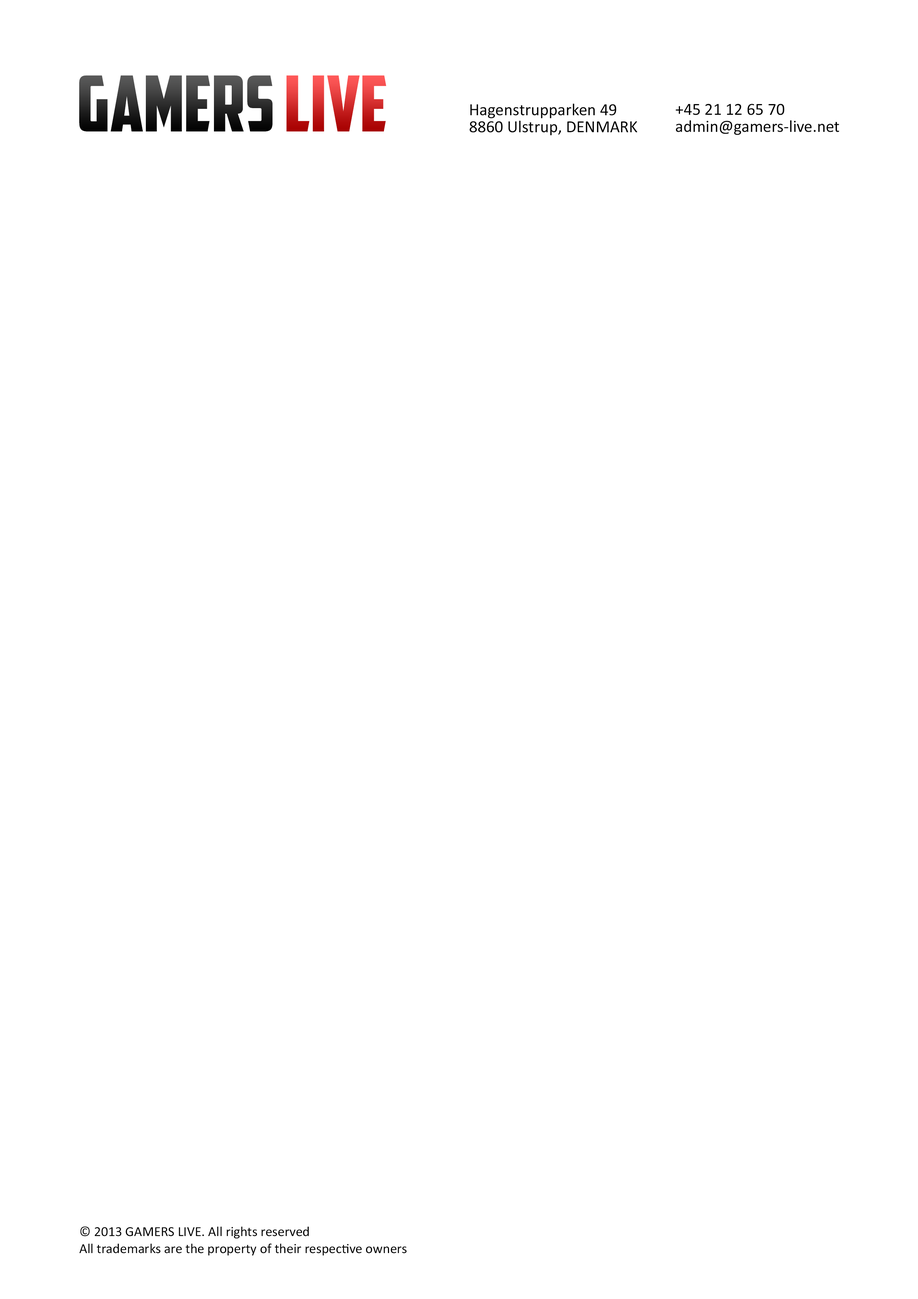
<style>
.page{position:relative;width:918px;height:1299px;background:#ffffff}
.page>*{position:absolute;margin:0}
.t1{font:77.1px "AmericanCaptain"}
.t2{font:17px/17px "Calibri";color:#000000}
.t3{font:13.9px/17px "Calibri";color:#000000}
</style>
<div class="page">
<p class="t1" style="left:79px;top:75px;width:308px;height:56px">Gamers Live</p>
<p class="t2" style="left:469px;top:104px;width:169px;height:32px">Hagenstrupparken 49<br>8860 Ulstrup, DENMARK</p>
<p class="t2" style="left:676px;top:104px;width:163px;height:31px">+45 21 12 65 70<br>admin@gamers-live.net</p>
<p class="t3" style="left:79px;top:1226px;width:328px;height:29px">© 2013 GAMERS LIVE. All rights reserved<br>All trademarks are the property of their respective owners</p>
</div>
